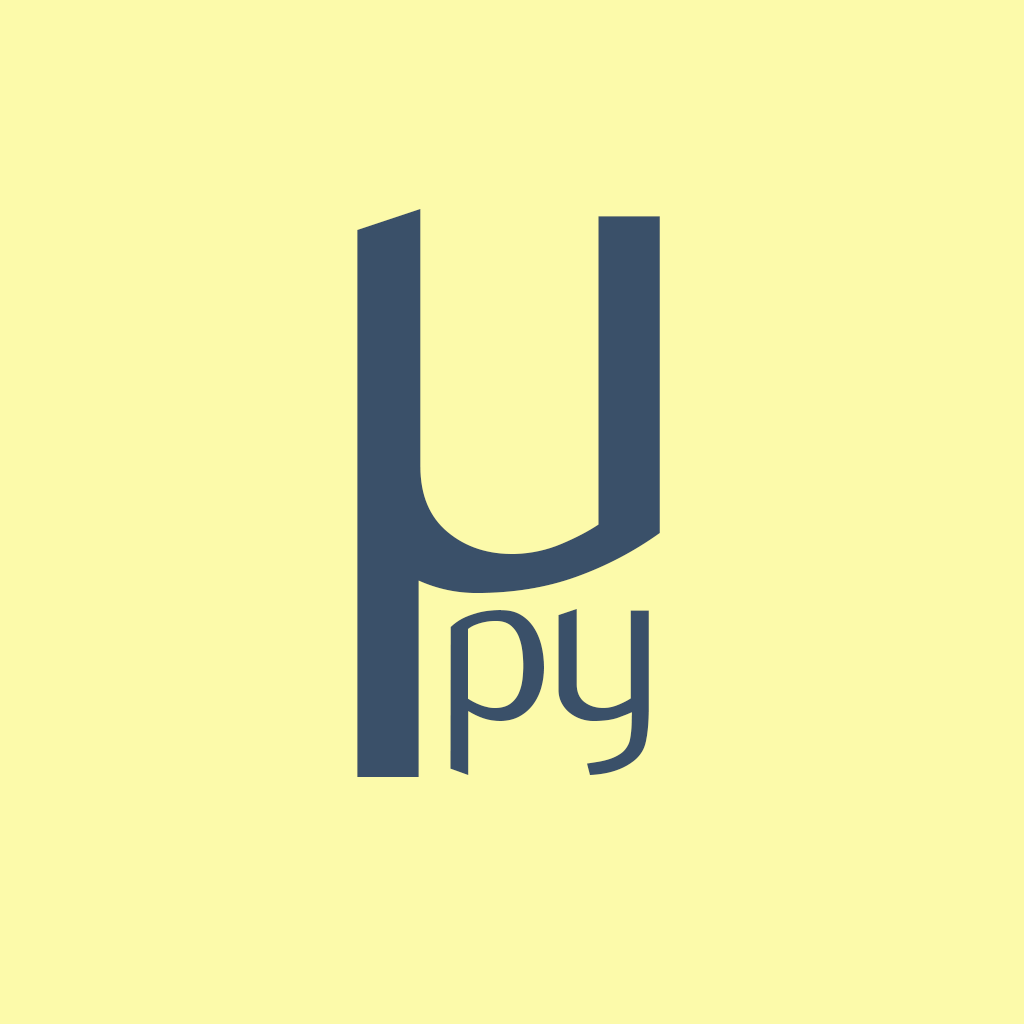
<style>
.page{position:relative;width:1024px;height:1024px;background:#fcfaaa}
.page>*{position:absolute;margin:0}
.t1{font:840px "Flux";color:#3a5069}
.t2{font:246px "Flux";letter-spacing:-0.06em;color:#3a5069}
</style>
<div class="page">
<p class="t1" style="left:357px;top:209px;width:303px;height:568px">μ</p>
<p class="t2" style="left:450px;top:609px;width:199px;height:166px">py</p>
</div>
